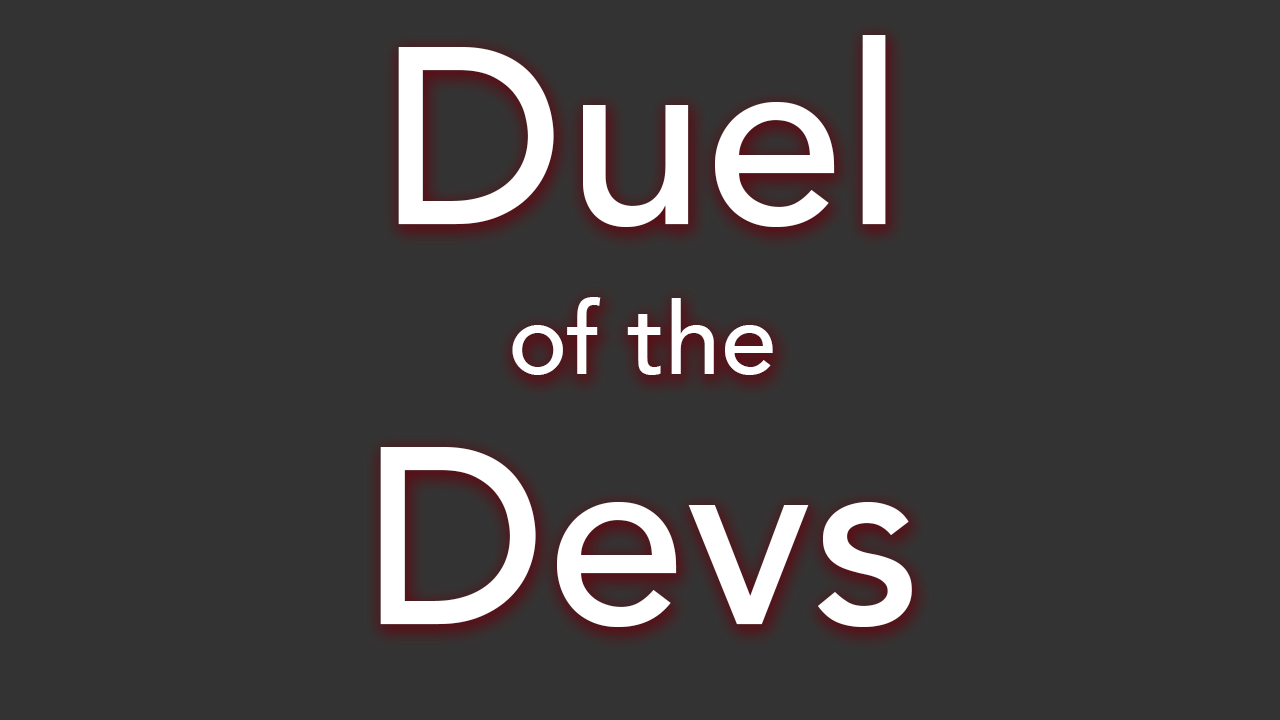
<style>
.page{position:relative;width:1280px;height:720px;background:#333333}
.page>*{position:absolute;margin:0}
.t1{font:100px/150px "Avenir-Medium";color:#ffffff}
.t2{font:250px/250px "Avenir-Medium";color:#ffffff}
</style>
<div class="page">
<p class="t1" style="left:380px;top:35px;width:532px;height:592px;text-align:center"><span class="t2">Duel<br></span>of the<br><span class="t2">Devs</span></p>
</div>
